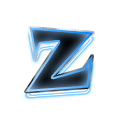
<style>
.page{position:relative;width:120px;height:120px;background:#ffffff}
.page>*{position:absolute;margin:0}
.t1{font:84px "SnapITC-Regular"}
</style>
<div class="page">
<p class="t1" style="left:25px;top:27px;width:69px;height:65px">Z</p>
</div>
